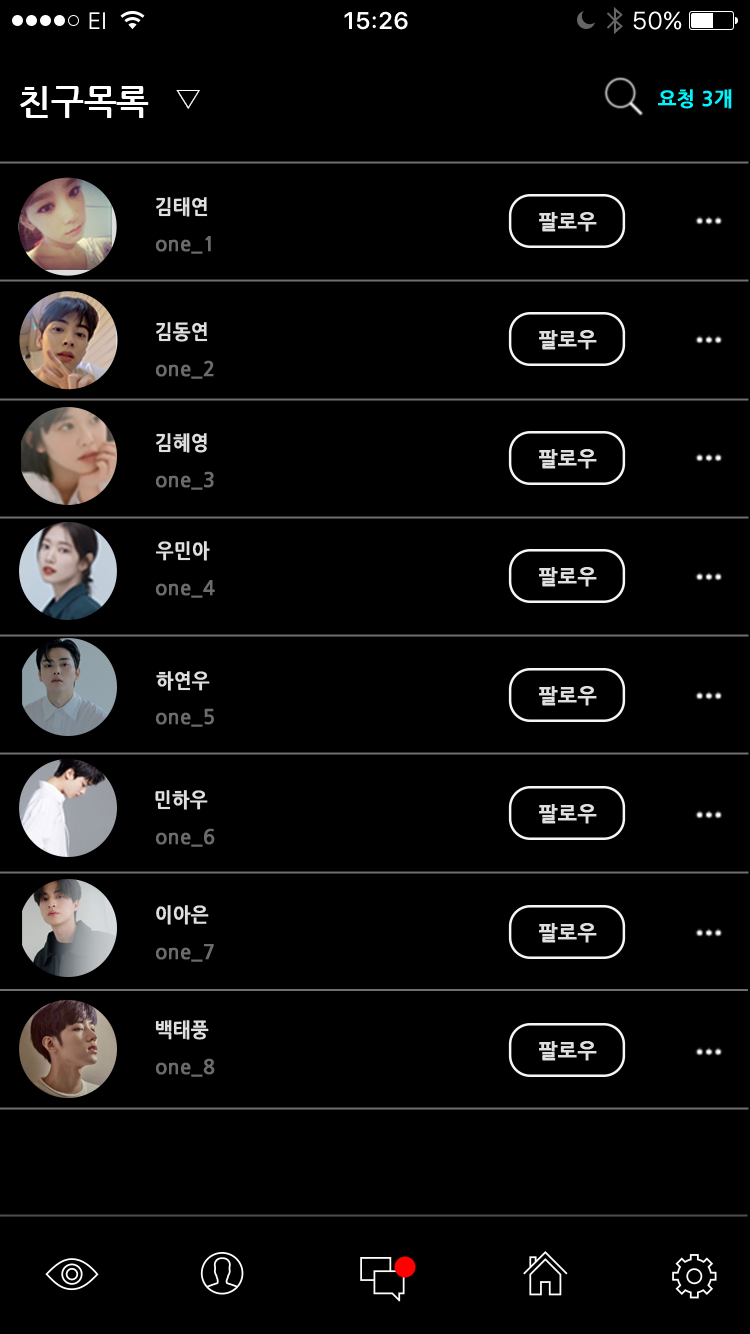
<style>
.page{position:relative;width:750px;height:1334px;background:#000000}
.page>*{position:absolute;margin:0}
.t1{font:35px "NanumGothicBold";color:#ffffff}
.t2{font:20px "NanumGothicBold";color:#00f6ff;font-weight:bold}
.t3{font:30px "Gulim";color:#ffffff}
.t4{font:20px "NanumGothicBold";color:#dfdfdf;font-weight:bold;scale:0.93 1}
.t5{font:20px "NanumGothicBold";color:#dfdfdf;font-weight:bold}
.t6{font:20px "NanumGothicBold";color:#6b6b6b;font-weight:bold}
</style>
<div class="page">
<p class="t1" style="left:20px;top:86px;width:129px;height:32px">친구목록</p>
<p class="t2" style="left:658px;top:89px;width:74px;height:20px">요청 3개</p>
<p class="t3" style="left:176px;top:90px;width:24px;height:19px">▽</p>
<p class="t4" style="left:156px;top:197px;width:52px;height:20px">김태연</p>
<p class="t5" style="left:539px;top:212px;width:58px;height:20px">팔로우</p>
<p class="t6" style="left:156px;top:236px;width:55px;height:18px">one_1</p>
<p class="t4" style="left:156px;top:322px;width:52px;height:20px">김동연</p>
<p class="t5" style="left:539px;top:330px;width:58px;height:20px">팔로우</p>
<p class="t6" style="left:156px;top:360px;width:58px;height:19px">one_2</p>
<p class="t4" style="left:156px;top:433px;width:51px;height:20px">김혜영</p>
<p class="t5" style="left:539px;top:449px;width:58px;height:20px">팔로우</p>
<p class="t6" style="left:156px;top:471px;width:58px;height:19px">one_3</p>
<p class="t4" style="left:155px;top:541px;width:55px;height:20px">우민아</p>
<p class="t5" style="left:539px;top:567px;width:58px;height:20px">팔로우</p>
<p class="t6" style="left:156px;top:580px;width:59px;height:18px">one_4</p>
<p class="t4" style="left:156px;top:671px;width:54px;height:20px">하연우</p>
<p class="t5" style="left:539px;top:686px;width:58px;height:20px">팔로우</p>
<p class="t6" style="left:156px;top:708px;width:58px;height:19px">one_5</p>
<p class="t4" style="left:155px;top:790px;width:53px;height:20px">민하우</p>
<p class="t5" style="left:539px;top:804px;width:58px;height:20px">팔로우</p>
<p class="t6" style="left:156px;top:828px;width:59px;height:19px">one_6</p>
<p class="t4" style="left:156px;top:905px;width:53px;height:20px">이아은</p>
<p class="t5" style="left:539px;top:923px;width:58px;height:20px">팔로우</p>
<p class="t6" style="left:156px;top:944px;width:58px;height:18px">one_7</p>
<p class="t4" style="left:155px;top:1020px;width:54px;height:20px">백태풍</p>
<p class="t5" style="left:539px;top:1041px;width:58px;height:20px">팔로우</p>
<p class="t6" style="left:156px;top:1058px;width:59px;height:19px">one_8</p>
</div>
